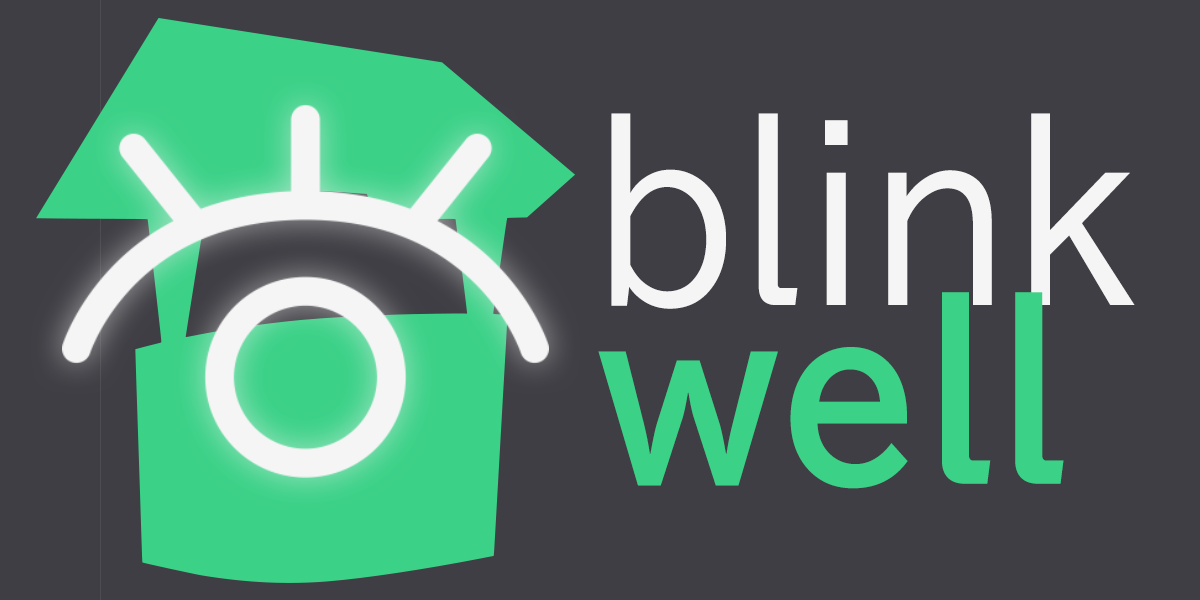
<style>
.page{position:relative;width:1200px;height:600px;background:#3e3e44}
.page>*{position:absolute;margin:0}
.t1{font:223.7px "BIZ-UDPGothic";color:#f5f5f5;scale:0.91 1}
.t2{font:223.7px "BIZ-UDPGothic-Bold";color:#3bd187;scale:0.91 1}
</style>
<div class="page">
<p class="t1" style="left:611px;top:113px;width:524px;height:196px">blink</p>
<p class="t2" style="left:598px;top:292px;width:466px;height:197px">well</p>
</div>
